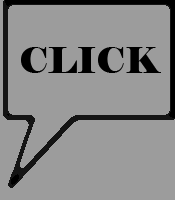
<style>
.page{position:relative;width:175px;height:200px;background:#9c9c9c}
.page>*{position:absolute;margin:0}
.t1{font:36px "Elephant-Regular";color:#000000}
</style>
<div class="page">
<p class="t1" style="left:21px;top:47px;width:140px;height:26px">CLICK</p>
</div>
